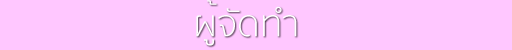
<style>
.page{position:relative;width:512px;height:50px;background:#ffc7ff}
.page>*{position:absolute;margin:0}
.t1{font:37.6px "SukhumvitSet-Thin";color:#ffffff}
.t2{font:45.9px "SukhumvitSet-Thin";color:#ffffff}
.t3{font:75.2px "SukhumvitSet-Thin";color:#ffffff}
</style>
<div class="page">
<p class="t1" style="left:196px;top:0px;width:101px;height:46px">ผู้จัดทำ<span class="t2">sa</span><span class="t3">z</span></p>
</div>
